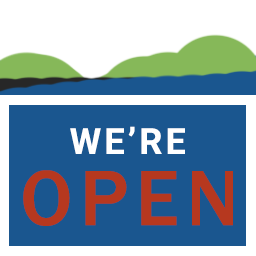
<style>
.page{position:relative;width:256px;height:256px;background:#1a568f}
.page>*{position:absolute;margin:0}
.t1{font:36px "Roboto-Bold";letter-spacing:0.09em;color:#ffffff}
.t2{font:81px "FranklinGothic-Medium";letter-spacing:0.09em;color:#b6381f}
</style>
<div class="page">
<p class="t1" style="left:70px;top:126px;width:115px;height:28px">WE’RE</p>
<p class="t2" style="left:23px;top:170px;width:210px;height:56px">OPEN</p>
</div>
